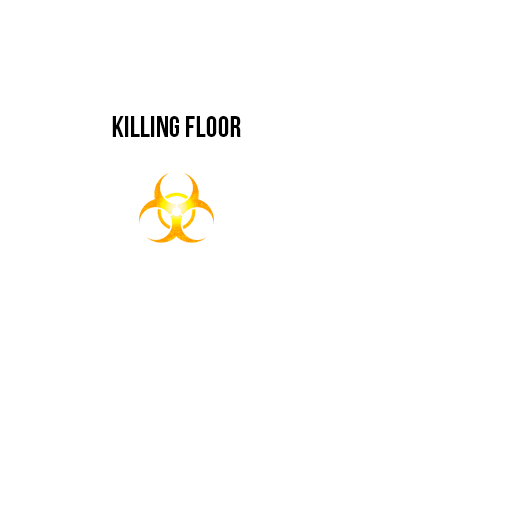
<style>
.page{position:relative;width:512px;height:512px;background:#ffffff}
.page>*{position:absolute;margin:0}
.t1{font:30px "BebasNeue";color:#000000}
</style>
<div class="page">
<p class="t1" style="left:112px;top:116px;width:129px;height:21px">killing floor</p>
</div>
